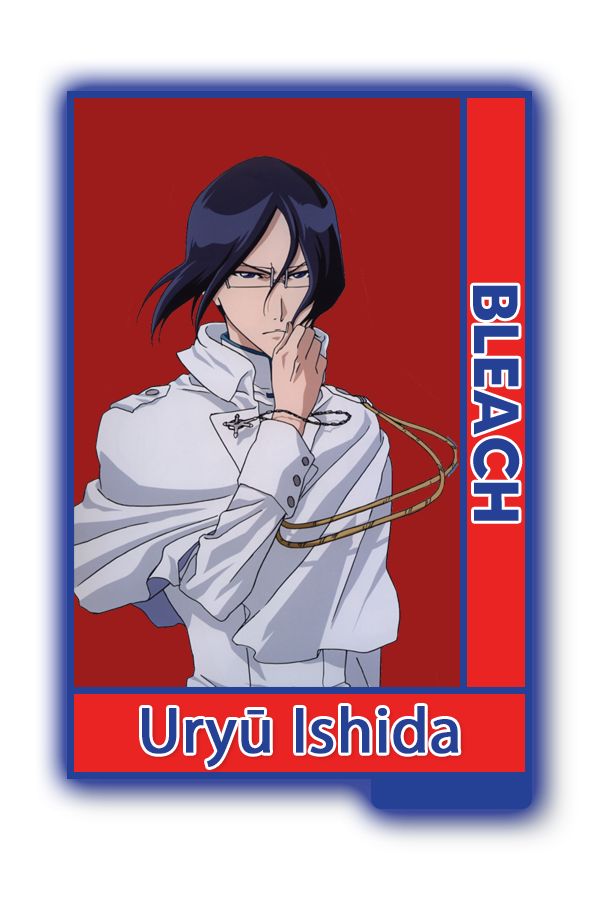
<style>
.page{position:relative;width:600px;height:900px;background:#ffffff}
.page>*{position:absolute;margin:0}
.t1{font:63.6px "MADETOMMY-Bold";color:#254195}
.t2{font:65.4px "MyriadPro-Regular";color:#254195;font-weight:bold}
</style>
<div class="page">
<p class="t1" style="left:473px;top:285px;width:47px;height:236px;rotate:90deg">BLEACH</p>
<p class="t2" style="left:142px;top:706px;width:317px;height:61px">Uryū Ishida</p>
</div>
